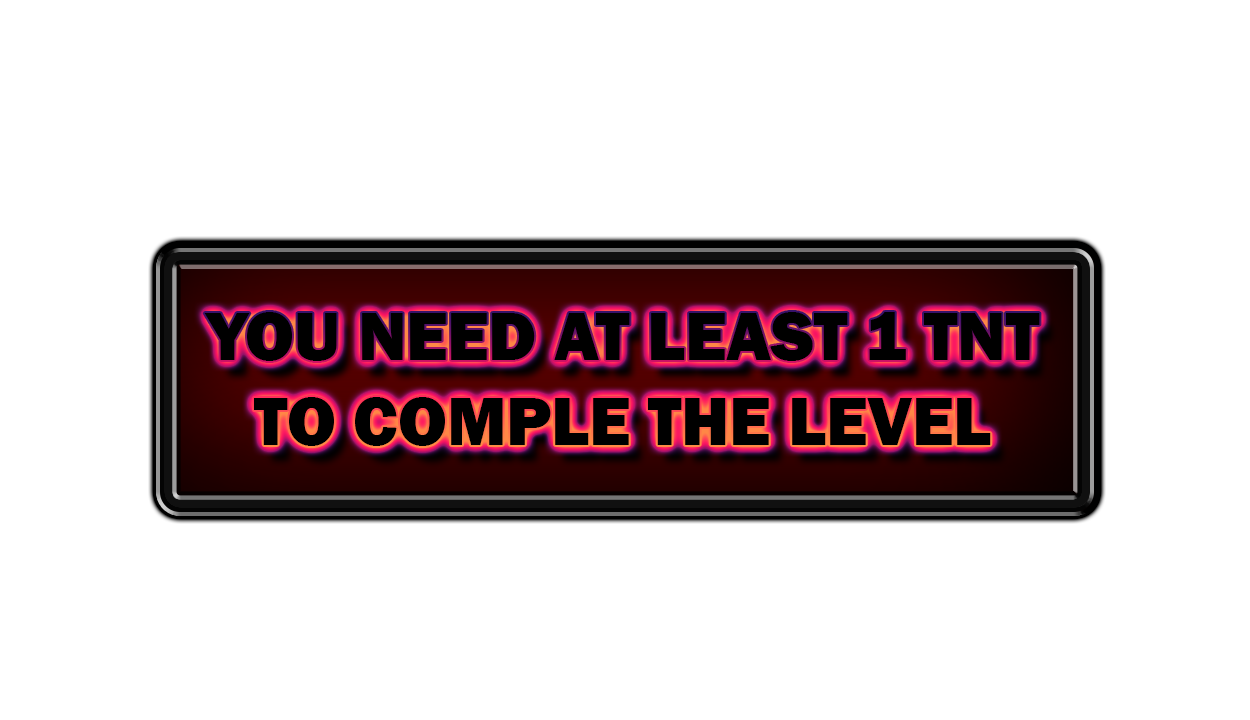
<style>
.page{position:relative;width:1250px;height:720px;background:#ffffff}
.page>*{position:absolute;margin:0}
.t1{font:70.5px "FranklinGothic-Heavy";color:#000000}
</style>
<div class="page">
<p class="t1" style="left:204px;top:312px;width:836px;height:134px;text-align:center">YOU NEED AT LEAST 1 TNT<br>TO COMPLE THE LEVEL</p>
</div>
